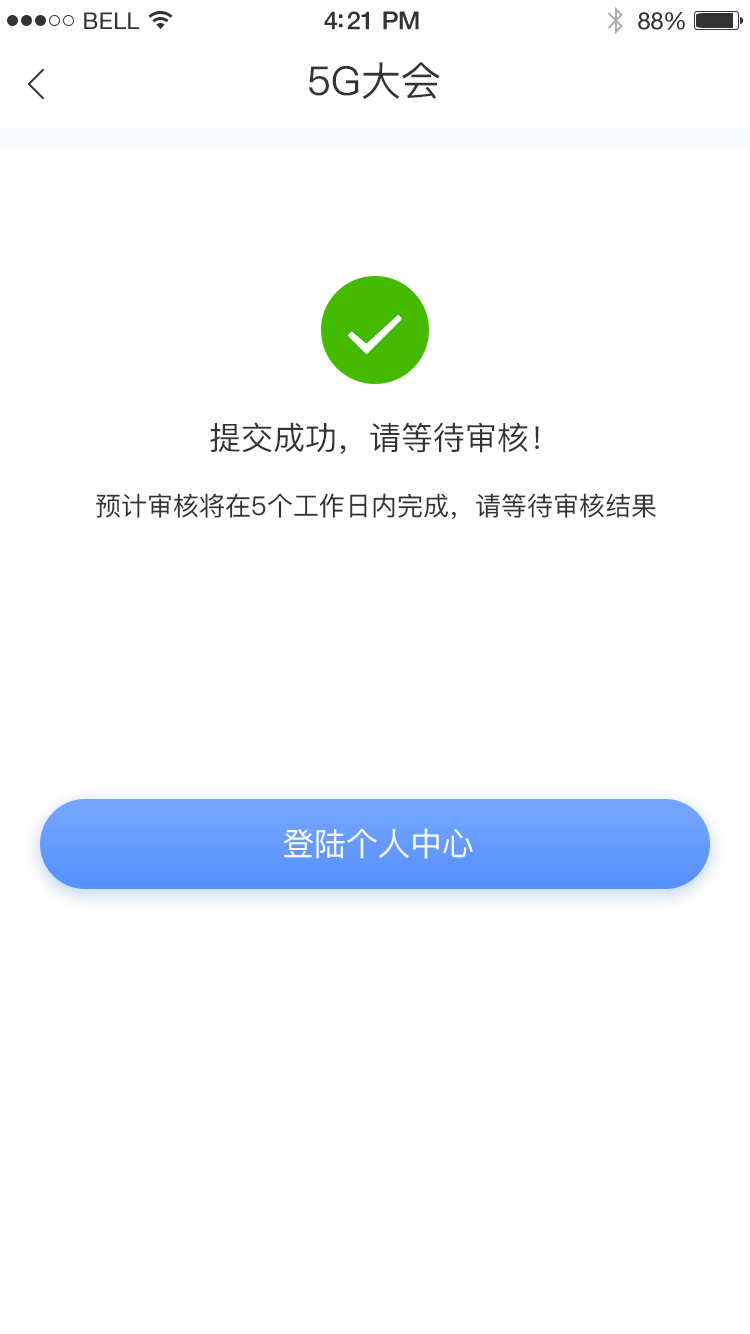
<style>
.page{position:relative;width:750px;height:1334px;background:#ffffff}
.page>*{position:absolute;margin:0}
.t1{font:23px "HelveticaNeue";letter-spacing:0.02em;color:#333333}
.t2{font:25px "HelveticaNeue-Medium";letter-spacing:-0.02em;color:#333333}
.t3{font:24px "HelveticaNeue";letter-spacing:-0.02em;color:#333333}
.t4{font:40px "PingFangSC-Regular";color:#333333}
.t5{font:32px "PingFangSC-Regular";color:#333333}
.t6{font:26px "PingFangSC-Regular";color:#333333}
.t7{font:32px "PingFangSC-Regular";color:#f8f9fc}
</style>
<div class="page">
<p class="t1" style="left:84px;top:12px;width:56px;height:17px">BELL</p>
<p class="t2" style="left:324px;top:11px;width:95px;height:19px">4:21 PM</p>
<p class="t3" style="left:638px;top:12px;width:47px;height:18px">88%</p>
<p class="t4" style="left:309px;top:62px;width:131px;height:37px">5G大会</p>
<p class="t5" style="left:210px;top:422px;width:329px;height:33px">提交成功，请等待审核！</p>
<p class="t6" style="left:96px;top:493px;width:560px;height:27px">预计审核将在5个工作日内完成，请等待审核结果</p>
<p class="t7" style="left:283px;top:828px;width:190px;height:31px">登陆个人中心</p>
</div>
